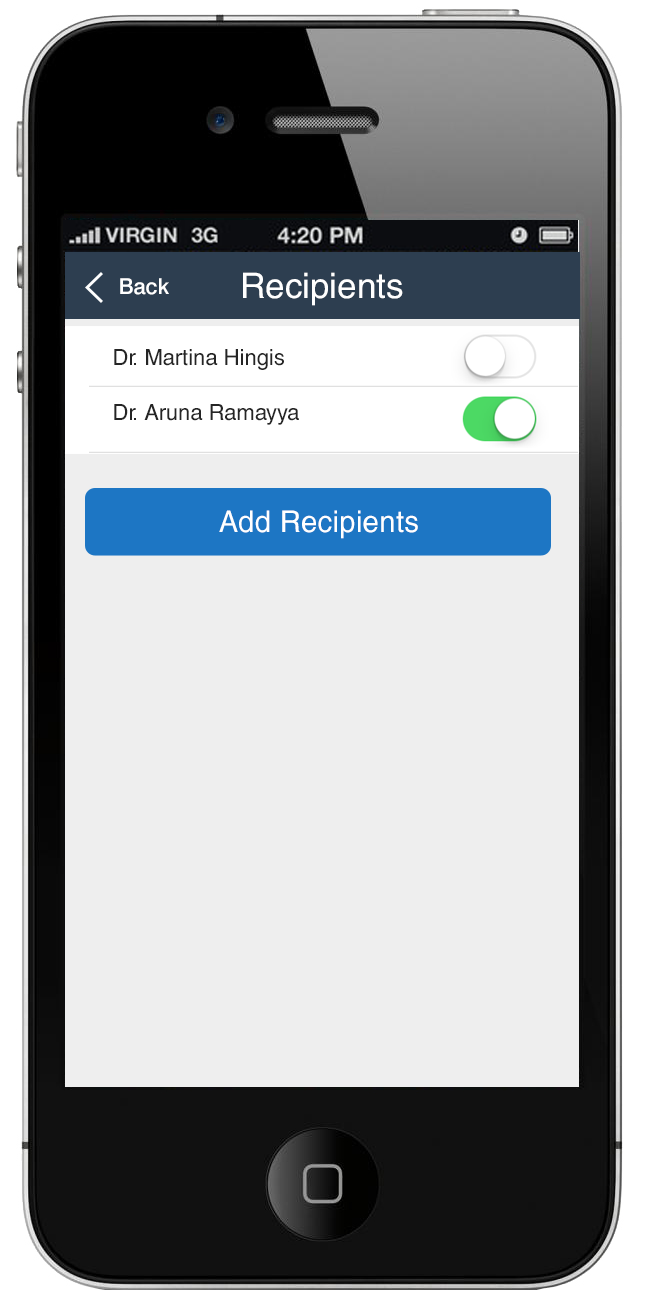
<style>
.page{position:relative;width:648px;height:1300px;background:#eeeeee}
.page>*{position:absolute;margin:0}
.t1{font:22px "Swiss721BT-Medium";color:#ffffff}
.t2{font:35px "HelveticaLT";color:#ffffff}
.t3{font:22px/55px "HelveticaCE-Regular";color:#252525}
.t4{font:30px "HelveticaCyr-Upright";color:#ffffff}
</style>
<div class="page">
<p class="t1" style="left:120px;top:278px;width:49px;height:17px">Back</p>
<p class="t2" style="left:243px;top:272px;width:160px;height:34px">Recipients</p>
<p class="t3" style="left:114px;top:349px;width:185px;height:76px">Dr. Martina Hingis<br>Dr. Aruna Ramayya</p>
<p class="t4" style="left:219px;top:510px;width:199px;height:29px">Add Recipients</p>
</div>
